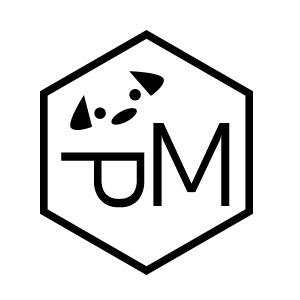
<style>
.page{position:relative;width:300px;height:300px;background:#ffffff}
.page>*{position:absolute;margin:0}
.t1{font:115px "NanumSquareR";color:#000000}
</style>
<div class="page">
<p class="t1" style="left:153px;top:123px;width:77px;height:83px">M</p>
<p class="t1" style="left:61px;top:152px;width:84px;height:56px;rotate:90deg">P</p>
</div>
